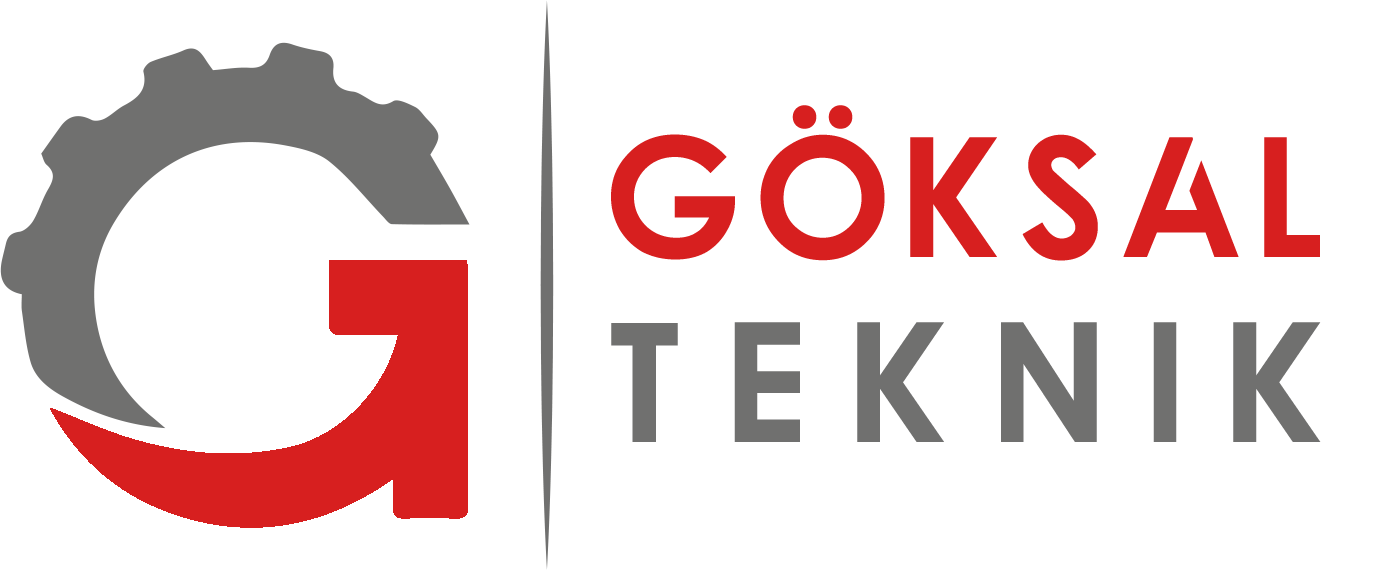
<style>
.page{position:relative;width:1389px;height:570px;background:#ffffff}
.page>*{position:absolute;margin:0}
.t1{font:175px "Qualy-Bold";letter-spacing:0.05em;color:#d71f1f}
.t2{font:175px "Qualy-Bold";letter-spacing:0.23em;color:#70706f}
</style>
<div class="page">
<p class="t1" style="left:611px;top:105px;width:709px;height:156px">GÖKSAL</p>
<p class="t2" style="left:611px;top:322px;width:710px;height:120px">TEKnık</p>
</div>
